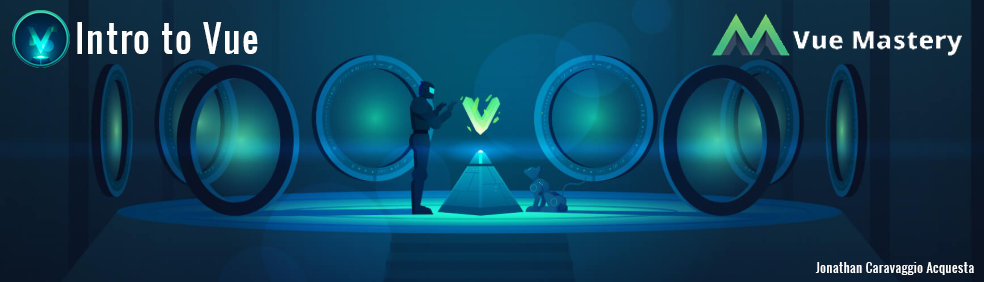
<style>
.page{position:relative;width:984px;height:282px}
.page>*{position:absolute;margin:0}
.t1{font:36px "Oswald-Regular";letter-spacing:0.05em;color:#ffffff}
.t2{font:12px "Oswald-Regular";letter-spacing:0.05em;color:#ffffff}
</style>
<div class="page">
<p class="t1" style="left:77px;top:22px;width:181px;height:32px">Intro to Vue</p>
<p class="t2" style="left:815px;top:262px;width:159px;height:13px">Jonathan Caravaggio Acquesta</p>
</div>
